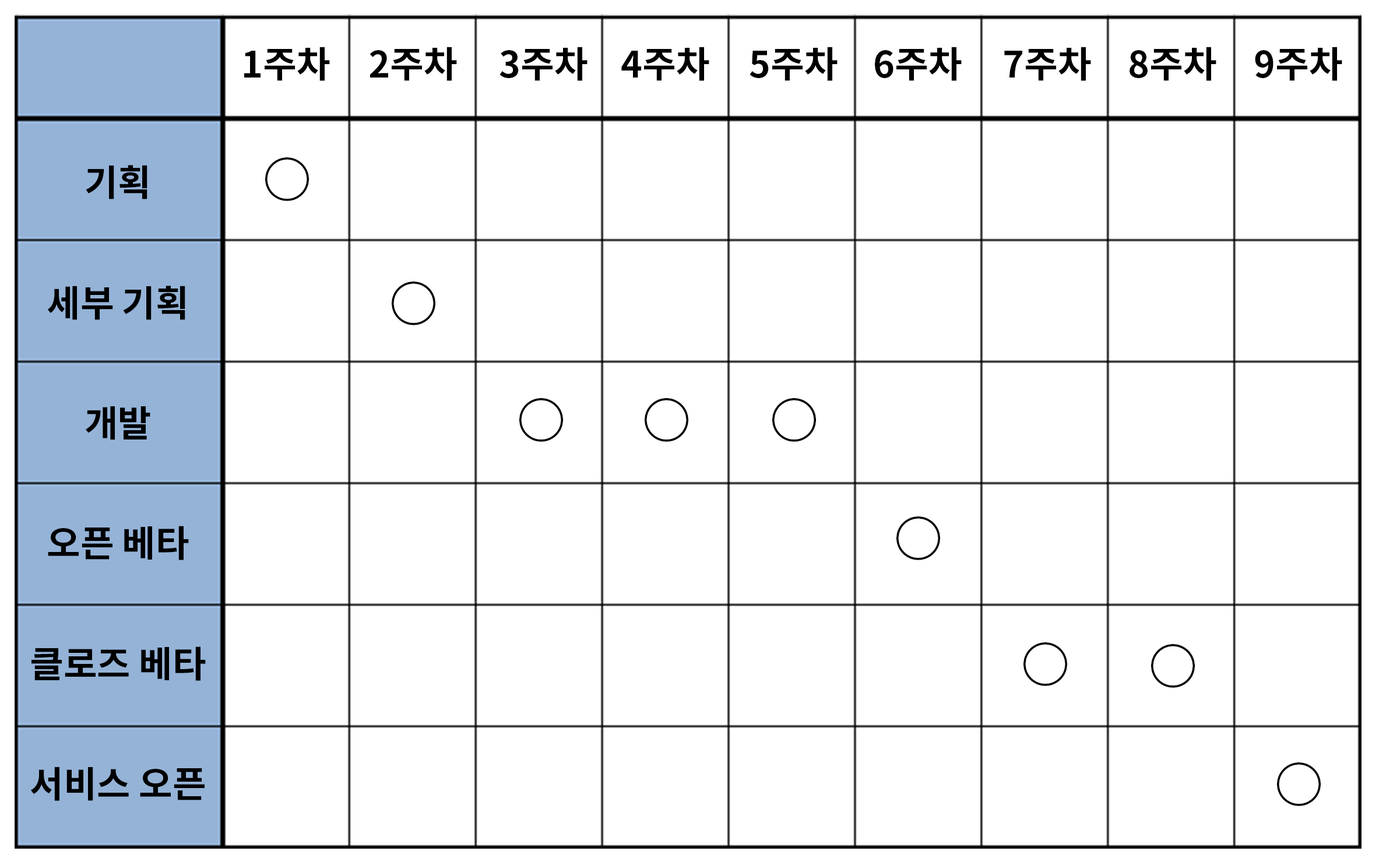
<style>
.page{position:relative;width:1379px;height:865px;background:#ffffff}
.page>*{position:absolute;margin:0}
.t1{font:36.4px "NotoSansCJKkr-Bold";color:#000000}
.t2{font:48.6px "NotoSansCJKkr-Bold";color:#000000}
</style>
<div class="page">
<p class="t1" style="left:244px;top:47px;width:86px;height:34px">1주차</p>
<p class="t1" style="left:369px;top:47px;width:88px;height:34px">2주차</p>
<p class="t1" style="left:499px;top:47px;width:88px;height:34px">3주차</p>
<p class="t1" style="left:621px;top:47px;width:88px;height:34px">4주차</p>
<p class="t1" style="left:749px;top:47px;width:88px;height:34px">5주차</p>
<p class="t1" style="left:875px;top:47px;width:87px;height:34px">6주차</p>
<p class="t1" style="left:1004px;top:47px;width:87px;height:34px">7주차</p>
<p class="t1" style="left:1129px;top:47px;width:87px;height:34px">8주차</p>
<p class="t1" style="left:1255px;top:47px;width:87px;height:34px">9주차</p>
<p class="t2" style="left:265px;top:157px;width:44px;height:44px">○</p>
<p class="t1" style="left:86px;top:165px;width:61px;height:34px">기획</p>
<p class="t2" style="left:392px;top:281px;width:43px;height:44px">○</p>
<p class="t1" style="left:47px;top:286px;width:138px;height:34px">세부 기획</p>
<p class="t2" style="left:519px;top:398px;width:44px;height:44px">○</p>
<p class="t2" style="left:645px;top:398px;width:43px;height:44px">○</p>
<p class="t2" style="left:772px;top:398px;width:44px;height:44px">○</p>
<p class="t1" style="left:86px;top:406px;width:64px;height:34px">개발</p>
<p class="t2" style="left:896px;top:516px;width:44px;height:44px">○</p>
<p class="t1" style="left:48px;top:526px;width:141px;height:34px">오픈 베타</p>
<p class="t1" style="left:31px;top:646px;width:175px;height:35px">클로즈 베타</p>
<p class="t2" style="left:1023px;top:642px;width:44px;height:44px">○</p>
<p class="t2" style="left:1151px;top:644px;width:44px;height:44px">○</p>
<p class="t1" style="left:31px;top:767px;width:174px;height:34px">서비스 오픈</p>
<p class="t2" style="left:1277px;top:762px;width:44px;height:44px">○</p>
</div>
